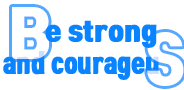
<style>
.page{position:relative;width:184px;height:90px;background:#ffffff}
.page>*{position:absolute;margin:0}
.t1{font:60px "TmonMonsoriOTFBlack";color:#ffffff}
.t2{font:26px "TmonMonsoriOTFBlack";color:#0a83ff;font-weight:bold}
.t3{font:26px "TmonMonsoriOTFBlack";color:#0a83ff;font-weight:bold;scale:0.85 1}
</style>
<div class="page">
<p class="t1" style="left:12px;top:7px;width:37px;height:52px;opacity:0.7">B</p>
<p class="t2" style="left:45px;top:20px;width:112px;height:28px">e strong</p>
<p class="t1" style="left:147px;top:32px;width:37px;height:54px;opacity:0.7">S</p>
<p class="t3" style="left:3px;top:51px;width:156px;height:29px"><span class="t2"><br></span>and courageu</p>
</div>
